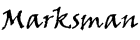
<style>
.page{position:relative;width:140px;height:40px;background:#ffffff}
.page>*{position:absolute;margin:0}
.t1{font:26.7px "VinerHandITC";color:#000000}
</style>
<div class="page">
<p class="t1" style="left:1px;top:6px;width:138px;height:25px">Marksman</p>
</div>
